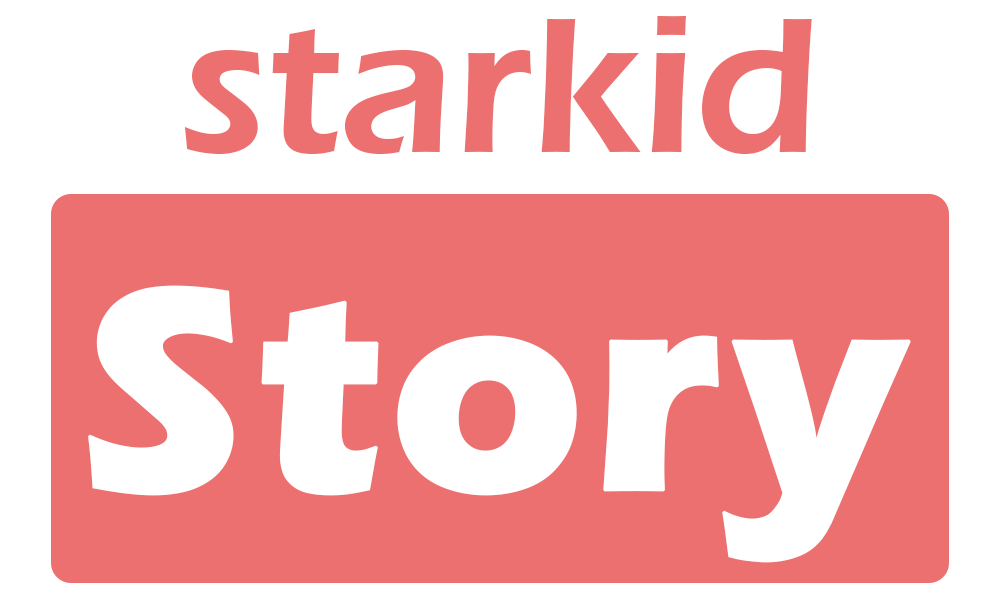
<style>
.page{position:relative;width:1000px;height:600px;background:#ffffff}
.page>*{position:absolute;margin:0}
.t1{font:199.6px "ErasITC-Demi";color:#ec7070}
.t2{font:299.4px "ErasITC-Bold";color:#ffffff;font-weight:bold}
</style>
<div class="page">
<p class="t1" style="left:184px;top:16px;width:628px;height:138px">starkid</p>
<p class="t2" style="left:88px;top:285px;width:823px;height:278px">Story</p>
</div>
